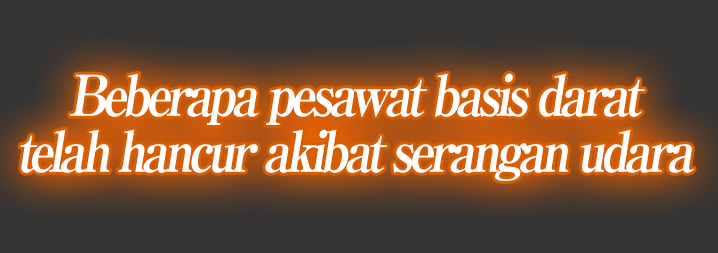
<style>
.page{position:relative;width:718px;height:253px;background:#333333}
.page>*{position:absolute;margin:0}
.t1{font:56px/56px "RyuminPro-ExBold";letter-spacing:-0.1em;color:#ffffff;font-style:italic;scale:0.9 1}
</style>
<div class="page">
<p class="t1" style="left:20px;top:73px;width:674px;height:108px;text-align:center">Beberapa pesawat basis darat<br>telah hancur akibat serangan udara</p>
</div>
